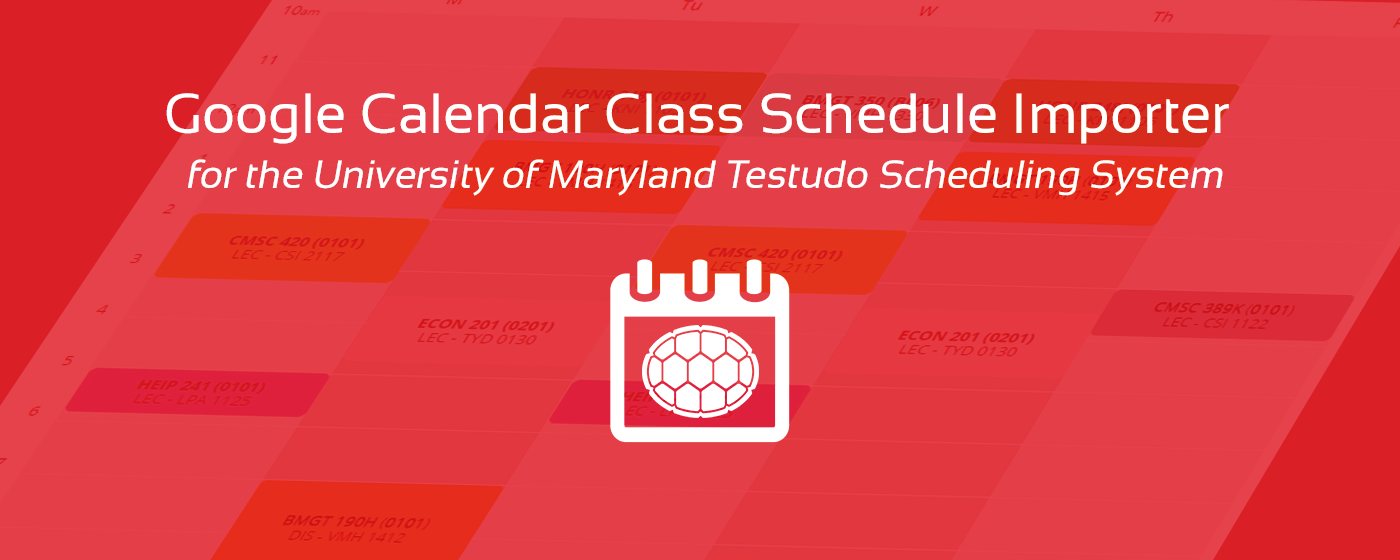
<style>
.page{position:relative;width:1400px;height:560px;background:#e43e48}
.page>*{position:absolute;margin:0}
.t1{font:56.4px "Sansation-Regular";color:#ffffff}
.t2{font:39.4px "Sansation-Regular";color:#ffffff;font-style:italic}
</style>
<div class="page">
<p class="t1" style="left:166px;top:93px;width:1063px;height:51px">Google Calendar Class Schedule Importer</p>
<p class="t2" style="left:188px;top:159px;width:1035px;height:37px">for the University of Maryland Testudo Scheduling System</p>
</div>
